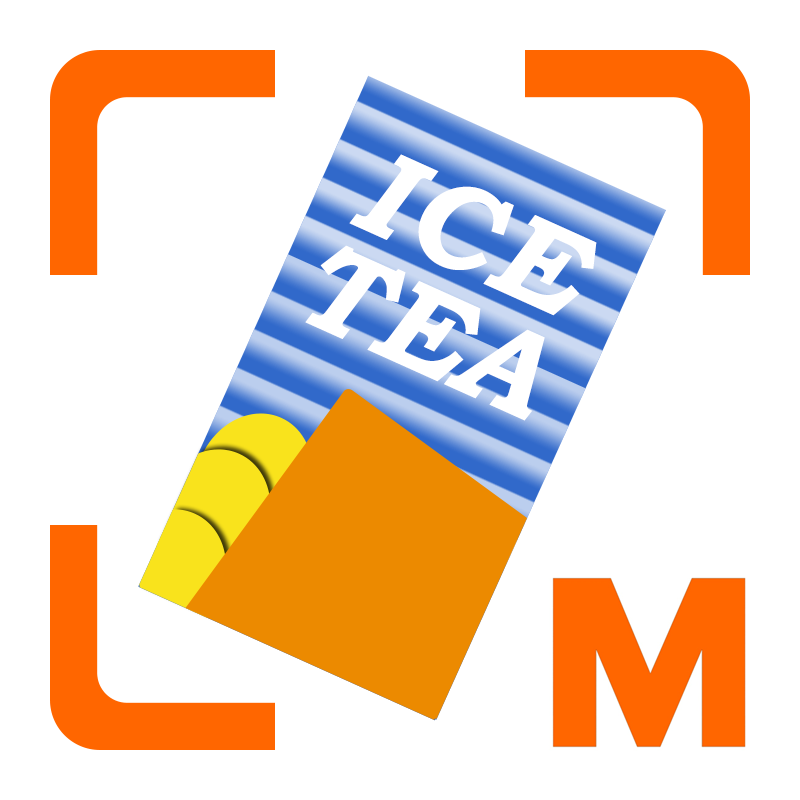
<style>
.page{position:relative;width:800px;height:800px;background:#ffffff}
.page>*{position:absolute;margin:0}
.t1{font:122.9px "BookmanOldStyle-BoldItalic";letter-spacing:0.05em;color:#ffffff}
.t2{font:122.9px "BookmanOldStyle-BoldItalic";color:#ffffff}
</style>
<div class="page">
<p class="t1" style="left:349px;top:154px;width:248px;height:162px;rotate:24deg">ICE</p>
<p class="t2" style="left:305px;top:245px;width:240px;height:176px;rotate:24deg">TEA</p>
</div>
